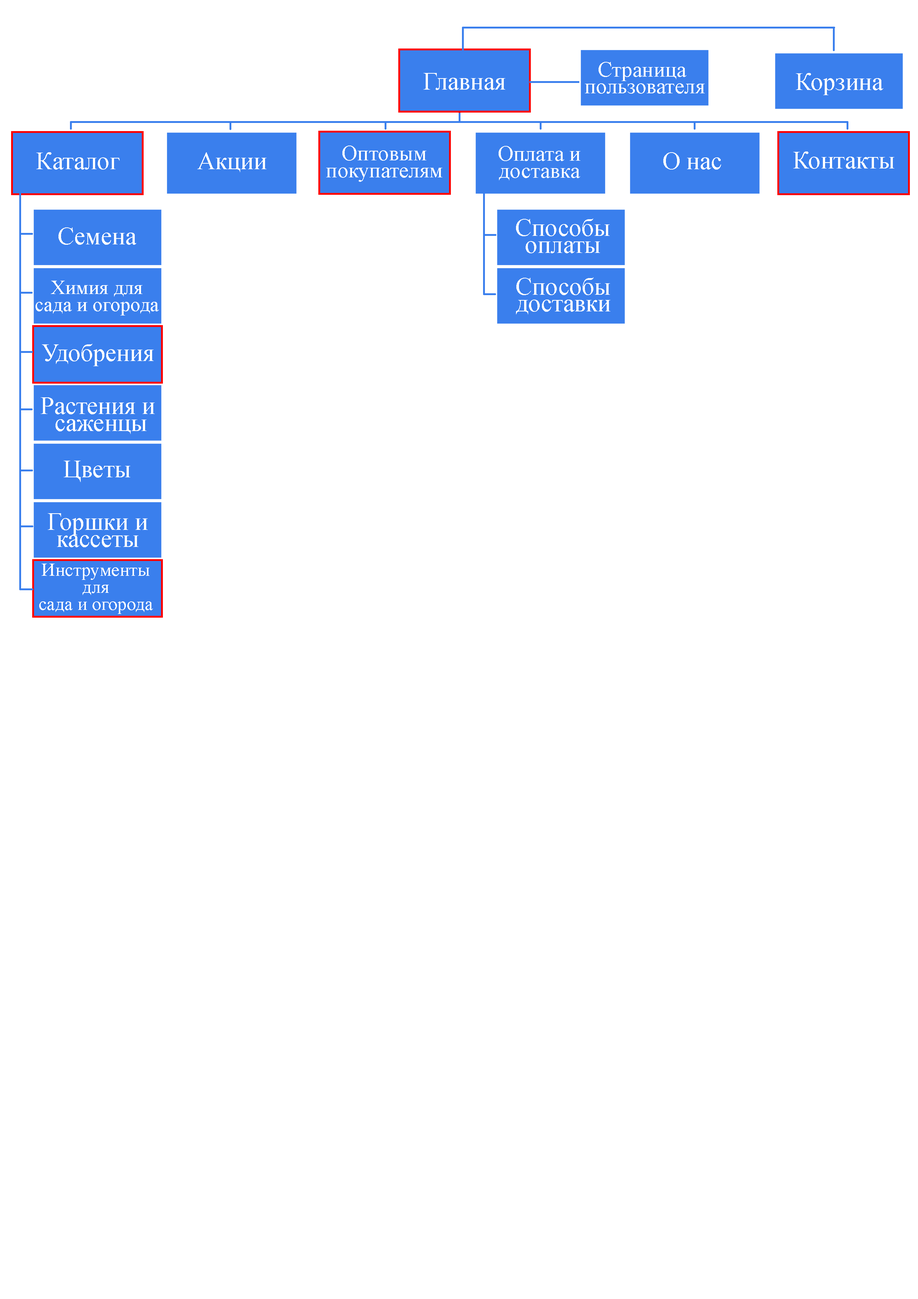
<style>
.page{position:relative;width:918px;height:1299px;background:#ffffff}
.page>*{position:absolute;margin:0}
.t1{font:21.6px/17px "TimesNewRomanPSMT";color:#ffffff}
.t2{font:24.7px "TimesNewRomanPSMT";color:#ffffff}
.t3{font:24.7px/17px "TimesNewRomanPSMT";color:#ffffff}
.t4{font:20.1px/17px "TimesNewRomanPSMT";color:#ffffff}
.t5{font:18.5px/17px "TimesNewRomanPSMT";color:#ffffff}
</style>
<div class="page">
<p class="t1" style="left:585px;top:62px;width:120px;height:32px;text-align:center">Страница <br>пользователя</p>
<p class="t2" style="left:796px;top:73px;width:87px;height:22px">Корзина</p>
<p class="t3" style="left:516px;top:218px;width:94px;height:35px;text-align:center">Способы<br>оплаты</p>
<p class="t2" style="left:58px;top:227px;width:78px;height:18px">Семена</p>
<p class="t4" style="left:36px;top:281px;width:123px;height:34px;text-align:center">Химия для<br>сада и огорода</p>
<p class="t3" style="left:516px;top:277px;width:94px;height:37px;text-align:center">Способы<br>доставки</p>
<p class="t2" style="left:42px;top:344px;width:112px;height:22px">Удобрения</p>
<p class="t3" style="left:41px;top:397px;width:114px;height:37px;text-align:center">Растения и <br>саженцы</p>
<p class="t2" style="left:64px;top:461px;width:66px;height:21px">Цветы</p>
<p class="t3" style="left:48px;top:513px;width:100px;height:34px;text-align:center">Горшки и<br>кассеты</p>
<p class="t5" style="left:39px;top:563px;width:114px;height:51px;text-align:center">Инструменты<br>для<br>сада и огорода</p>
</div>
